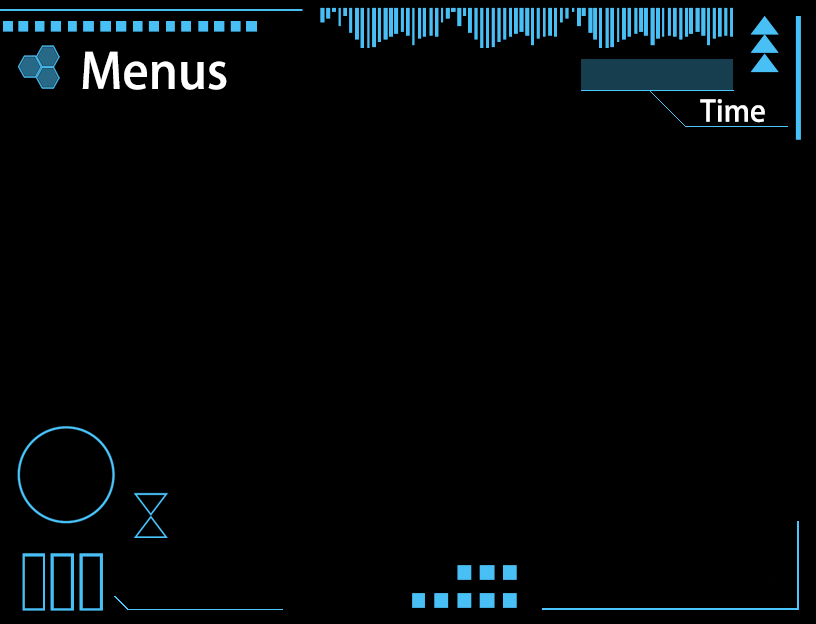
<style>
.page{position:relative;width:816px;height:624px;background:#000000}
.page>*{position:absolute;margin:0}
.t1{font:48.6px "AdobeHeitiStd-Regular";color:#ffffff}
.t2{font:29.2px "AdobeHeitiStd-Regular";color:#ffffff}
</style>
<div class="page">
<p class="t1" style="left:82px;top:51px;width:145px;height:39px">Menus</p>
<p class="t2" style="left:700px;top:99px;width:65px;height:24px">Time</p>
</div>
